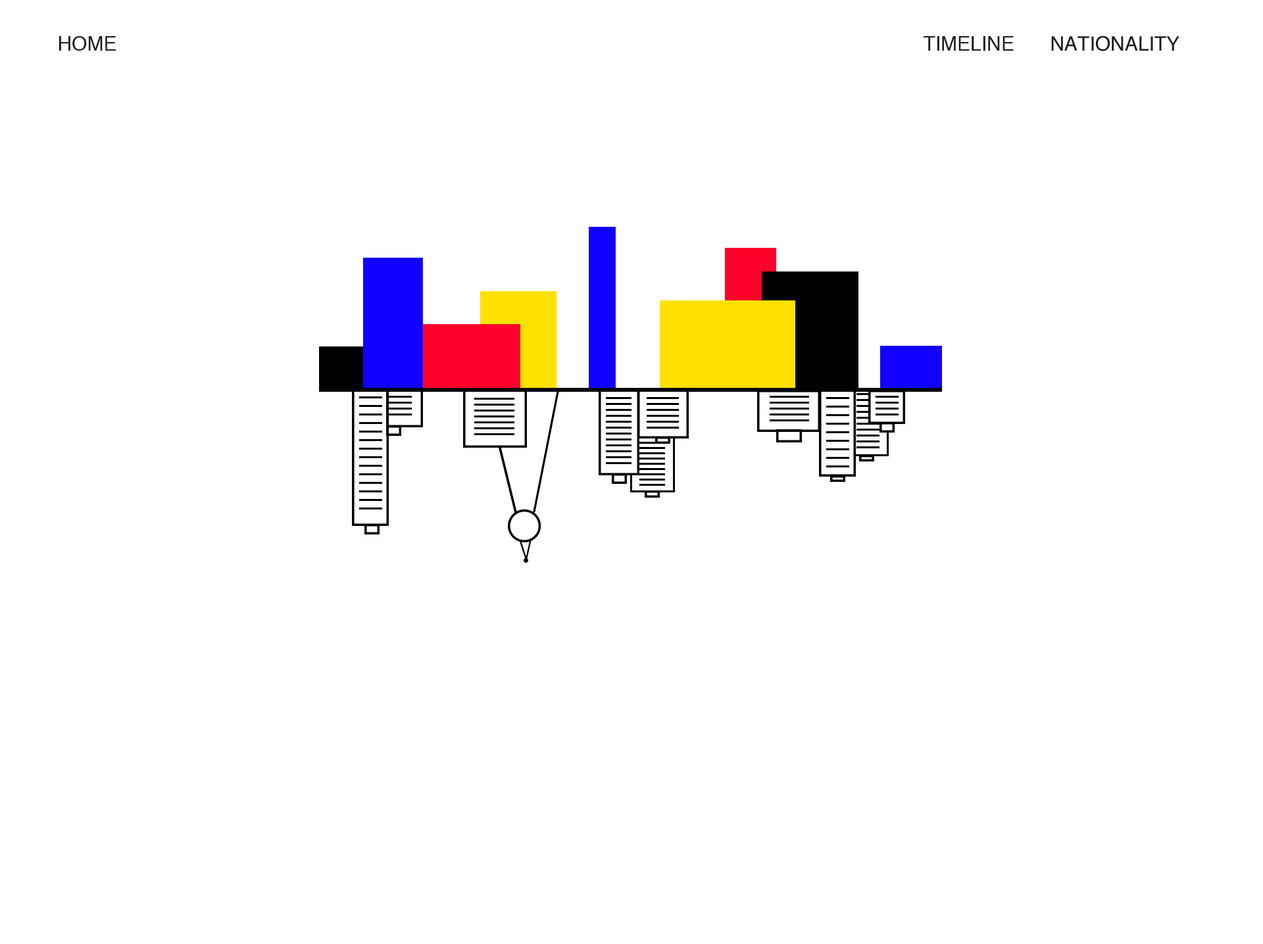
<style>
.page{position:relative;width:1263px;height:944px;background:#ffffff}
.page>*{position:absolute;margin:0}
.t1{font:19.7px "Helvetica";color:#1b1b1b}
</style>
<div class="page">
<p class="t1" style="left:59px;top:36px;width:57px;height:15px">HOME</p>
<p class="t1" style="left:923px;top:36px;width:90px;height:15px">TIMELINE</p>
<p class="t1" style="left:1051px;top:36px;width:128px;height:15px">NATIONALITY</p>
</div>
